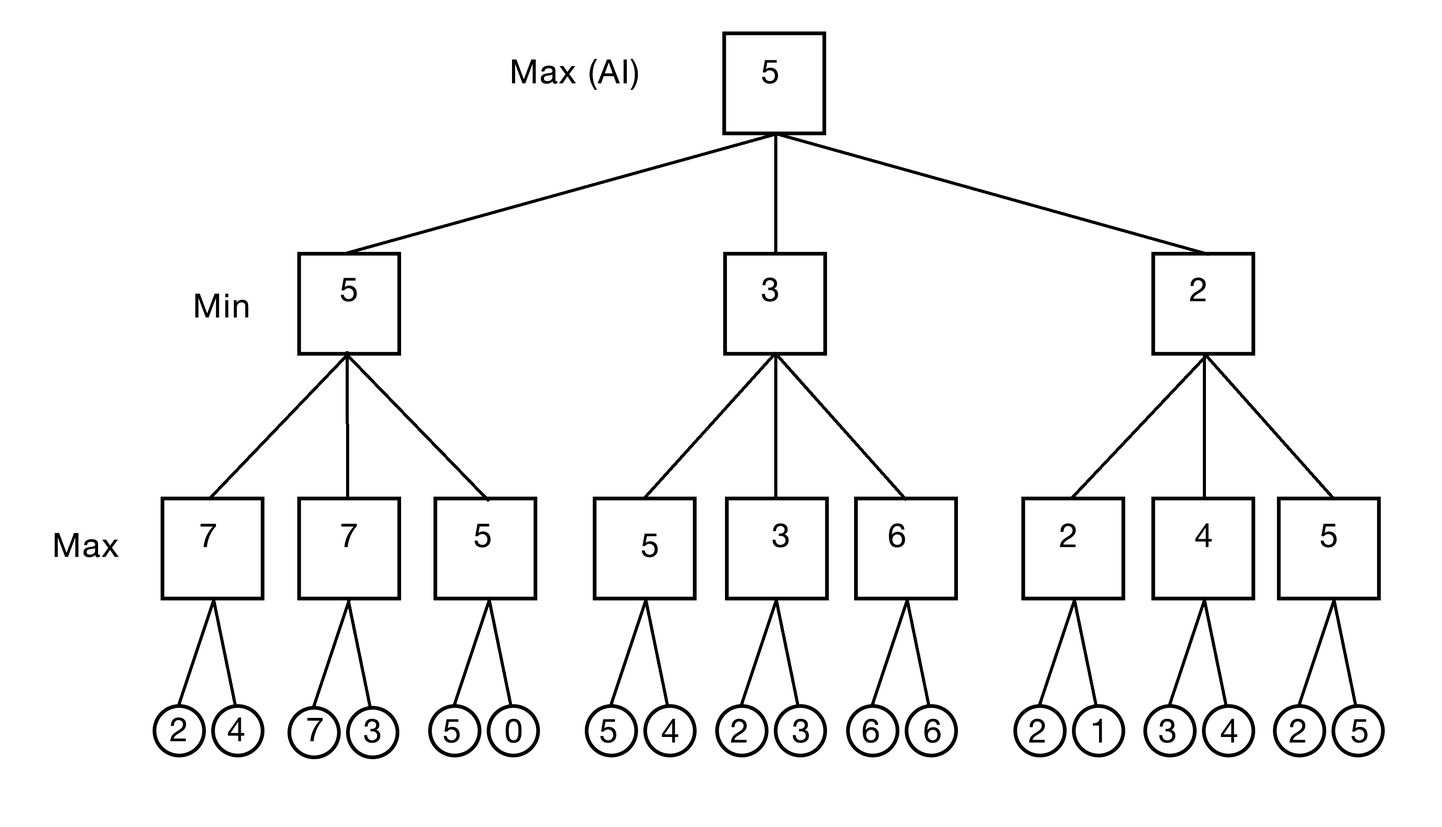
<style>
.page{position:relative;width:1442px;height:827px;background:#ffffff}
.page>*{position:absolute;margin:0}
.t1{font:33.3px "HelveticaNeue";letter-spacing:0.04em;color:#000000}
</style>
<div class="page">
<p class="t1" style="left:512px;top:59px;width:126px;height:31px">Max (AI)</p>
<p class="t1" style="left:762px;top:60px;width:16px;height:24px">5</p>
<p class="t1" style="left:341px;top:278px;width:16px;height:24px">5</p>
<p class="t1" style="left:762px;top:278px;width:16px;height:24px">3</p>
<p class="t1" style="left:1190px;top:278px;width:16px;height:24px">2</p>
<p class="t1" style="left:195px;top:294px;width:53px;height:24px">Min</p>
<p class="t1" style="left:55px;top:533px;width:64px;height:25px">Max</p>
<p class="t1" style="left:200px;top:524px;width:16px;height:23px">7</p>
<p class="t1" style="left:341px;top:524px;width:16px;height:23px">7</p>
<p class="t1" style="left:474px;top:524px;width:17px;height:24px">5</p>
<p class="t1" style="left:641px;top:534px;width:17px;height:24px">5</p>
<p class="t1" style="left:772px;top:523px;width:17px;height:25px">3</p>
<p class="t1" style="left:888px;top:523px;width:17px;height:25px">6</p>
<p class="t1" style="left:1060px;top:523px;width:16px;height:24px">2</p>
<p class="t1" style="left:1195px;top:523px;width:16px;height:24px">4</p>
<p class="t1" style="left:1320px;top:524px;width:16px;height:24px">5</p>
<p class="t1" style="left:170px;top:718px;width:16px;height:24px">2</p>
<p class="t1" style="left:228px;top:718px;width:16px;height:24px">4</p>
<p class="t1" style="left:307px;top:718px;width:16px;height:24px">7</p>
<p class="t1" style="left:364px;top:719px;width:16px;height:24px">3</p>
<p class="t1" style="left:444px;top:719px;width:16px;height:24px">5</p>
<p class="t1" style="left:505px;top:719px;width:17px;height:24px">0</p>
<p class="t1" style="left:600px;top:719px;width:16px;height:24px">5</p>
<p class="t1" style="left:661px;top:719px;width:17px;height:24px">4</p>
<p class="t1" style="left:731px;top:719px;width:15px;height:24px">2</p>
<p class="t1" style="left:792px;top:719px;width:17px;height:24px">3</p>
<p class="t1" style="left:862px;top:719px;width:17px;height:24px">6</p>
<p class="t1" style="left:924px;top:719px;width:16px;height:24px">6</p>
<p class="t1" style="left:1029px;top:719px;width:16px;height:24px">2</p>
<p class="t1" style="left:1092px;top:719px;width:10px;height:24px">1</p>
<p class="t1" style="left:1159px;top:719px;width:16px;height:24px">3</p>
<p class="t1" style="left:1220px;top:719px;width:17px;height:24px">4</p>
<p class="t1" style="left:1289px;top:719px;width:16px;height:24px">2</p>
<p class="t1" style="left:1351px;top:719px;width:16px;height:24px">5</p>
</div>
